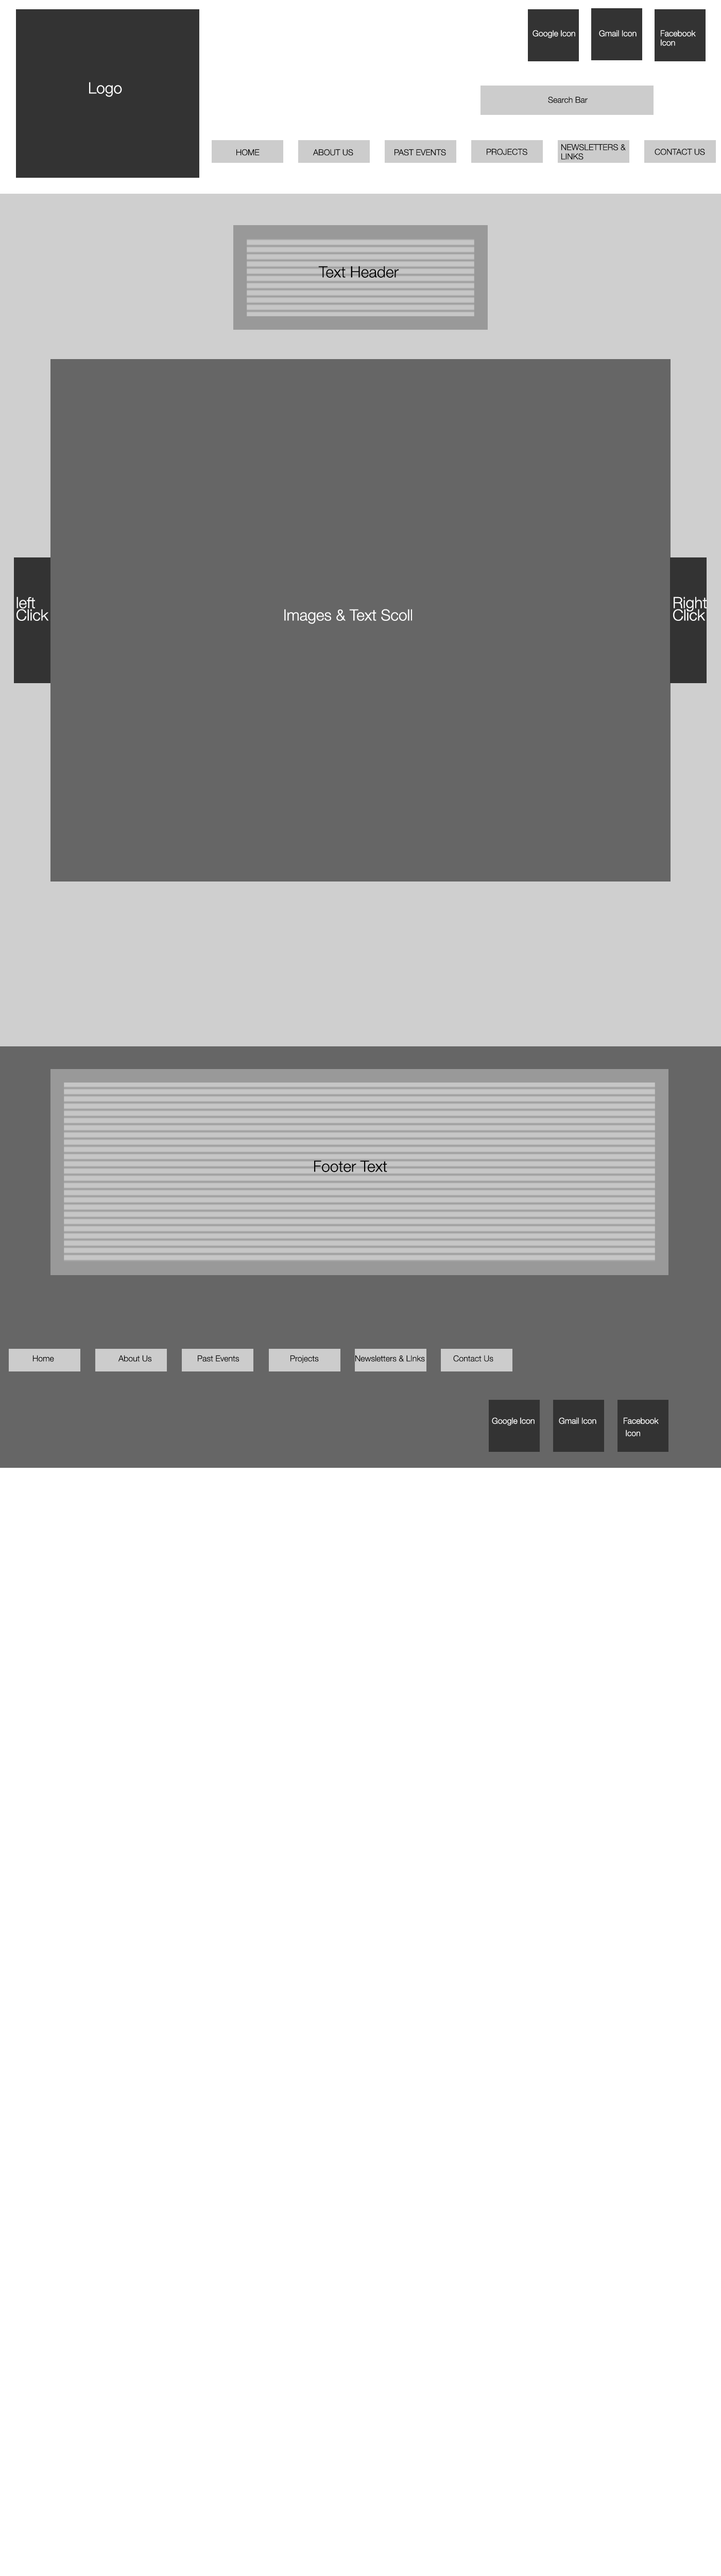
<style>
.page{position:relative;width:721px;height:2576px;background:#ffffff}
.page>*{position:absolute;margin:0}
.t1{font:8.2px "HelveticaNeue-Light";color:#ffffff}
.t2{font:8.2px/9.3px "HelveticaNeue-Light";color:#ffffff}
.t3{font:15.5px "HelveticaNeue-Light";color:#ffffff}
.t4{font:8.2px "HelveticaNeue-Light";color:#000000}
.t5{font:8.2px/9.3px "HelveticaNeue-Light";color:#000000}
.t6{font:15.5px "HelveticaNeue-Light";color:#000000}
.t7{font:15.5px/12.4px "HelveticaNeue-Light";color:#ffffff}
.t8{font:8.2px/12.4px "HelveticaNeue-Light";color:#ffffff}
</style>
<div class="page">
<p class="t1" style="left:533px;top:30px;width:42px;height:8px">Google Icon</p>
<p class="t1" style="left:599px;top:30px;width:38px;height:7px">Gmail Icon</p>
<p class="t2" style="left:661px;top:30px;width:35px;height:16px">Facebook Icon</p>
<p class="t3" style="left:89px;top:82px;width:33px;height:15px">Logo</p>
<p class="t4" style="left:548px;top:96px;width:40px;height:7px">Search Bar</p>
<p class="t4" style="left:236px;top:149px;width:24px;height:7px">HOME</p>
<p class="t4" style="left:313px;top:149px;width:40px;height:7px">ABOUT US</p>
<p class="t4" style="left:395px;top:149px;width:51px;height:7px">PAST EVENTS</p>
<p class="t4" style="left:487px;top:148px;width:41px;height:7px">PROJECTS</p>
<p class="t5" style="left:562px;top:144px;width:64px;height:16px">NEWSLETTERS &amp; LINKS</p>
<p class="t4" style="left:655px;top:148px;width:50px;height:7px">CONTACT US</p>
<p class="t6" style="left:318px;top:266px;width:81px;height:12px">Text Header</p>
<p class="t7" style="left:16px;top:597px;width:33px;height:24px">left <br>Click</p>
<p class="t7" style="left:673px;top:597px;width:34px;height:24px">Right <br>Click</p>
<p class="t3" style="left:284px;top:609px;width:128px;height:15px">Images &amp; Text Scoll</p>
<p class="t6" style="left:314px;top:1160px;width:73px;height:12px">Footer Text</p>
<p class="t4" style="left:33px;top:1355px;width:21px;height:7px">Home</p>
<p class="t4" style="left:118px;top:1355px;width:34px;height:7px">About Us</p>
<p class="t4" style="left:198px;top:1355px;width:41px;height:7px">Past Events</p>
<p class="t4" style="left:291px;top:1355px;width:28px;height:8px">Projects</p>
<p class="t4" style="left:355px;top:1355px;width:70px;height:7px">Newsletters &amp; LInks</p>
<p class="t4" style="left:453px;top:1355px;width:41px;height:7px">Contact Us</p>
<p class="t1" style="left:492px;top:1417px;width:43px;height:9px">Google Icon</p>
<p class="t1" style="left:559px;top:1417px;width:38px;height:7px">Gmail Icon</p>
<p class="t8" style="left:624px;top:1417px;width:35px;height:19px">Facebook<br> Icon</p>
</div>
